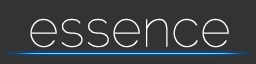
<style>
.page{position:relative;width:256px;height:64px;background:#333333}
.page>*{position:absolute;margin:0}
.t1{font:52.5px "Raleway-Thin";color:#ffffff}
</style>
<div class="page">
<p class="t1" style="left:30px;top:18px;width:199px;height:30px">essence</p>
</div>
